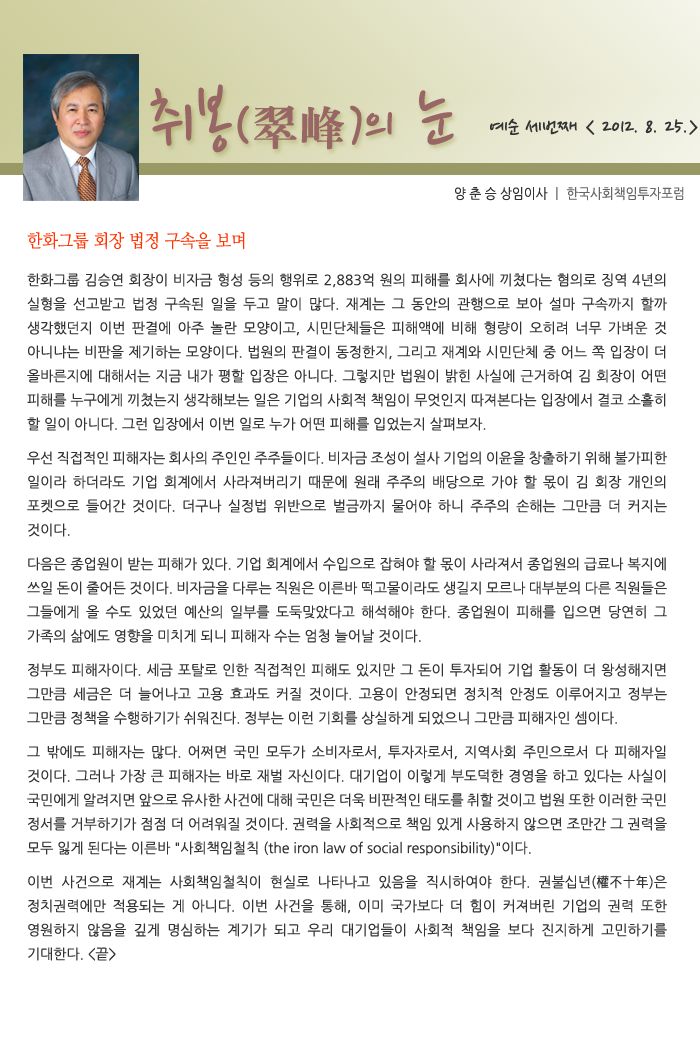
<style>
.page{position:relative;width:700px;height:1061px;background:#ffffff}
.page>*{position:absolute;margin:0}
.t1{font:77.5px "NanumPen";color:#996666}
.t2{font:60px "NanumPen";color:#996666}
.t3{font:48px "H2mjrE";color:#996666}
.t4{font:24px "NanumPen";color:#333333}
.t5{font:14px "NanumGothic";color:#666666;scale:0.9 1}
.t6{font:14px "NanumGothic";color:#333333;scale:0.9 1}
.t7{font:18px "NanumMyeongjo";color:#ff3300;scale:0.9 1}
.t8{font:14px/24px "NanumGothic";color:#333333}
</style>
<div class="page">
<p class="t1" style="left:150px;top:84px;width:304px;height:69px">취봉<span class="t2">(</span><span class="t3">翠峰</span><span class="t2">)</span><span class="t2">의</span> 눈</p>
<p class="t4" style="left:490px;top:118px;width:208px;height:17px">예순 세번째 &lt; 2012. 8. 25.&gt;</p>
<p class="t5" style="left:455px;top:187px;width:229px;height:14px"><span class="t6">양 춘 승 상임이사 </span>ㅣ 한국사회책임투자포럼</p>
<p class="t7" style="left:27px;top:232px;width:218px;height:18px">한화그룹 회장 법정 구속을 보며</p>
<p class="t8" style="left:27px;top:273px;width:640px;height:688px;text-align:justify">한화그룹 김승연 회장이 비자금 형성 등의 행위로 2,883억 원의 피해를 회사에 끼쳤다는 혐의로 징역 4년의 실형을 선고받고 법정 구속된 일을 두고 말이 많다. 재계는 그 동안의 관행으로 보아 설마 구속까지 할까 생각했던지 이번 판결에 아주 놀란 모양이고, 시민단체들은 피해액에 비해 형량이 오히려 너무 가벼운 것 아니냐는 비판을 제기하는 모양이다. 법원의 판결이 동정한지, 그리고 재계와 시민단체 중 어느 쪽 입장이 더 올바른지에 대해서는 지금 내가 평할 입장은 아니다. 그렇지만 법원이 밝힌 사실에 근거하여 김 회장이 어떤 피해를 누구에게 끼쳤는지 생각해보는 일은 기업의 사회적 책임이 무엇인지 따져본다는 입장에서 결코 소홀히 할 일이 아니다. 그런 입장에서 이번 일로 누가 어떤 피해를 입었는지 살펴보자.<br>우선 직접적인 피해자는 회사의 주인인 주주들이다. 비자금 조성이 설사 기업의 이윤을 창출하기 위해 불가피한 일이라 하더라도 기업 회계에서 사라져버리기 때문에 원래 주주의 배당으로 가야 할 몫이 김 회장 개인의 포켓으로 들어간 것이다. 더구나 실정법 위반으로 벌금까지 물어야 하니 주주의 손해는 그만큼 더 커지는 것이다.<br>다음은 종업원이 받는 피해가 있다. 기업 회계에서 수입으로 잡혀야 할 몫이 사라져서 종업원의 급료나 복지에 쓰일 돈이 줄어든 것이다. 비자금을 다루는 직원은 이른바 떡고물이라도 생길지 모르나 대부분의 다른 직원들은 그들에게 올 수도 있었던 예산의 일부를 도둑맞았다고 해석해야 한다. 종업원이 피해를 입으면 당연히 그 가족의 삶에도 영향을 미치게 되니 피해자 수는 엄청 늘어날 것이다.<br>정부도 피해자이다. 세금 포탈로 인한 직접적인 피해도 있지만 그 돈이 투자되어 기업 활동이 더 왕성해지면 그만큼 세금은 더 늘어나고 고용 효과도 커질 것이다. 고용이 안정되면 정치적 안정도 이루어지고 정부는 그만큼 정책을 수행하기가 쉬워진다. 정부는 이런 기회를 상실하게 되었으니 그만큼 피해자인 셈이다.<br>그 밖에도 피해자는 많다. 어쩌면 국민 모두가 소비자로서, 투자자로서, 지역사회 주민으로서 다 피해자일 것이다. 그러나 가장 큰 피해자는 바로 재벌 자신이다. 대기업이 이렇게 부도덕한 경영을 하고 있다는 사실이 국민에게 알려지면 앞으로 유사한 사건에 대해 국민은 더욱 비판적인 태도를 취할 것이고 법원 또한 이러한 국민 정서를 거부하기가 점점 더 어려워질 것이다. 권력을 사회적으로 책임 있게 사용하지 않으면 조만간 그 권력을 모두 잃게 된다는 이른바 "사회책임철칙 (the iron law of social responsibility)"이다. <br>이번 사건으로 재계는 사회책임철칙이 현실로 나타나고 있음을 직시하여야 한다. 권불십년(權不十年)은 정치권력에만 적용되는 게 아니다. 이번 사건을 통해, 이미 국가보다 더 힘이 커져버린 기업의 권력 또한 영원하지 않음을 깊게 명심하는 계기가 되고 우리 대기업들이 사회적 책임을 보다 진지하게 고민하기를 기대한다. &lt;끝&gt;</p>
</div>
